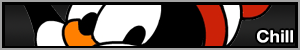
<style>
.page{position:relative;width:300px;height:50px;background:#000000}
.page>*{position:absolute;margin:0}
.t1{font:16.7px "AlteHaasGrotesk_Bold";color:#ffffff;scale:1.07 1}
</style>
<div class="page">
<p class="t1" style="left:257px;top:30px;width:36px;height:13px">Chill</p>
</div>
